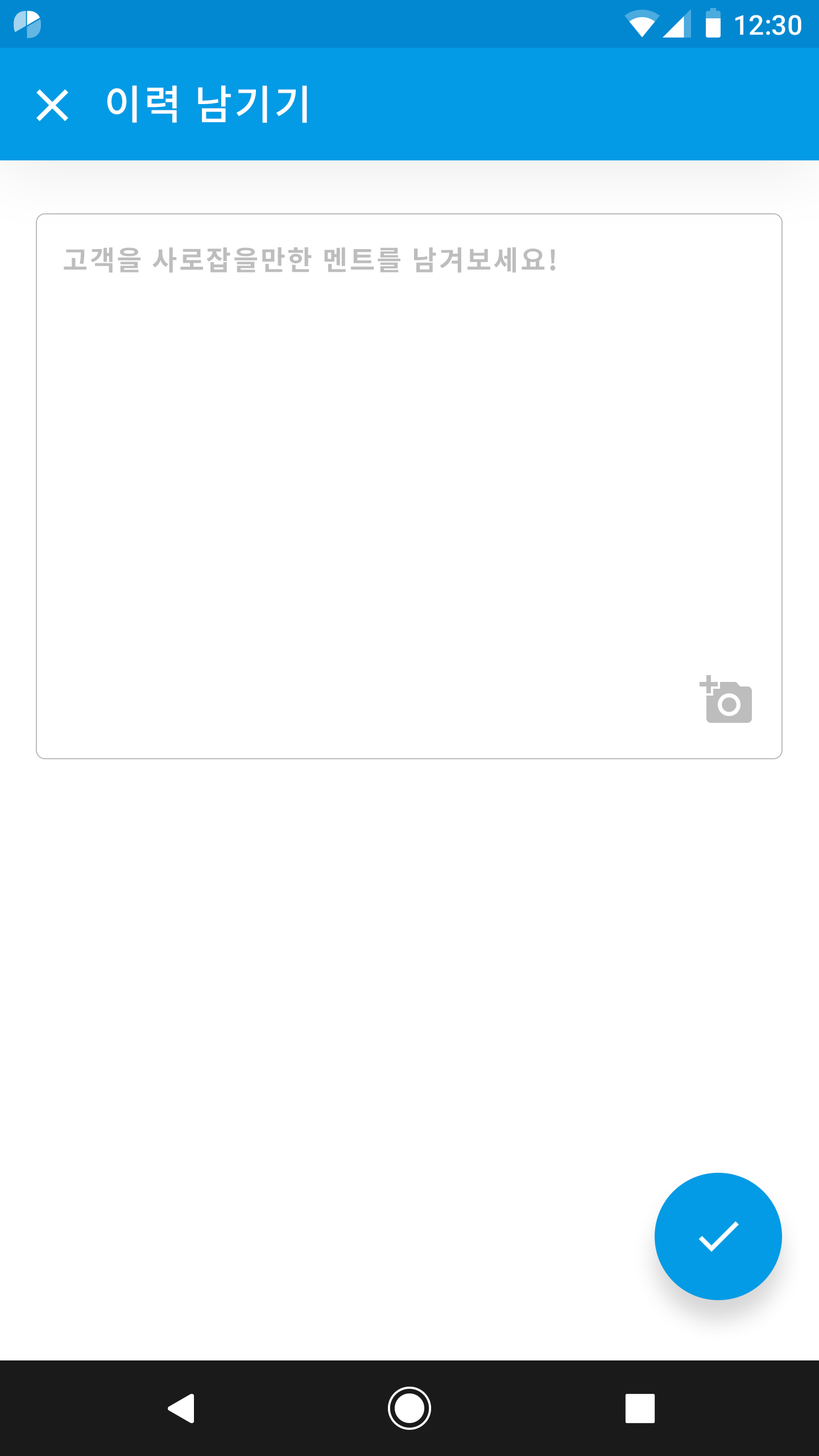
<style>
.page{position:relative;width:819px;height:1456px;background:#ffffff}
.page>*{position:absolute;margin:0}
.t1{font:27.3px "Roboto-Medium";color:#ffffff}
.t2{font:40.9px "NotoSansCJKkr-Medium";letter-spacing:0.05em;color:#ffffff}
.t3{font:27.3px "NotoSansCJKkr-Bold";letter-spacing:0.072em;color:#bdbdbd}
</style>
<div class="page">
<p class="t1" style="left:735px;top:15px;width:66px;height:20px">12:30</p>
<p class="t2" style="left:107px;top:85px;width:200px;height:38px">이력 남기기</p>
<p class="t3" style="left:64px;top:247px;width:492px;height:26px">고객을 사로잡을만한 멘트를 남겨보세요!</p>
</div>
